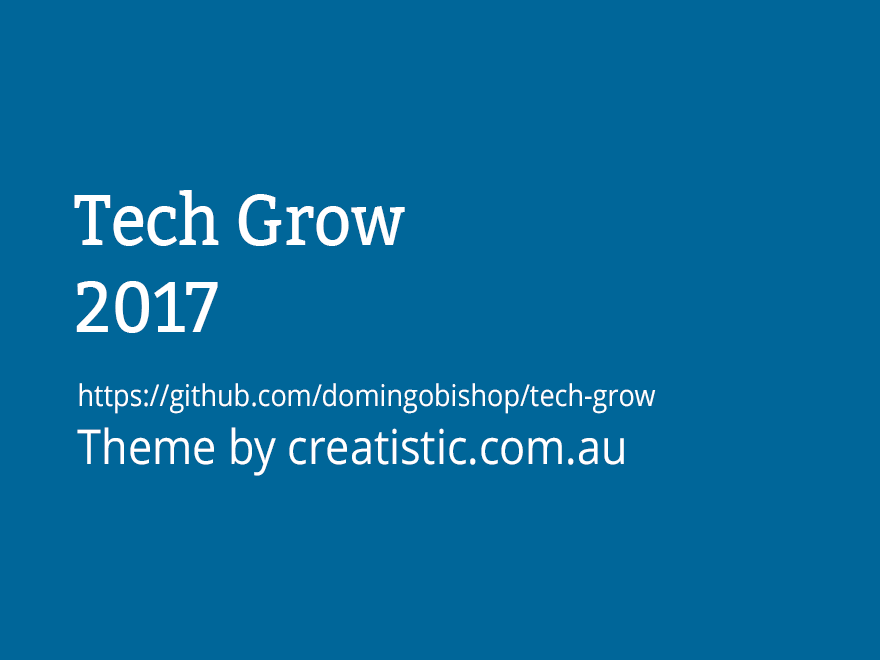
<style>
.page{position:relative;width:880px;height:660px;background:#006699}
.page>*{position:absolute;margin:0}
.t1{font:72px "Bitter-Regular";color:#ffffff;scale:0.9 1}
.t2{font:30px "OpenSans";color:#ffffff;scale:0.9 1}
.t3{font:48px "OpenSans";color:#ffffff;scale:0.9 1}
</style>
<div class="page">
<p class="t1" style="left:74px;top:190px;width:331px;height:143px">Tech Grow <br>2017</p>
<p class="t2" style="left:77px;top:383px;width:579px;height:93px">https://github.com/domingobishop/tech-grow<br><span class="t3">Theme by creatistic.com.au</span></p>
</div>
